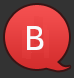
<style>
.page{position:relative;width:74px;height:78px;background:#333333}
.page>*{position:absolute;margin:0}
.t1{font:36px "SIL-Hei-Med-Jian";color:#f9fafb}
</style>
<div class="page">
<p class="t1" style="left:27px;top:26px;width:17px;height:24px">B</p>
</div>
